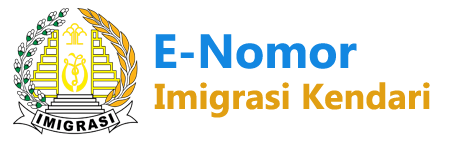
<style>
.page{position:relative;width:449px;height:146px;background:#ffffff}
.page>*{position:absolute;margin:0}
.t1{font:48px "Gadugi-Bold";color:#1387e1}
.t2{font:36px "Gadugi-Bold";color:#e19f13}
</style>
<div class="page">
<p class="t1" style="left:155px;top:34px;width:202px;height:35px">E-Nomor</p>
<p class="t2" style="left:154px;top:82px;width:276px;height:36px">Imigrasi Kendari</p>
</div>
